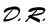
<style>
.page{position:relative;width:50px;height:28px;background:#ffffff}
.page>*{position:absolute;margin:0}
.t1{font:22.5px "BrushScriptMT";color:#000000;font-style:italic;scale:1.1 1}
</style>
<div class="page">
<p class="t1" style="left:3px;top:6px;width:43px;height:17px">D.R.</p>
</div>
